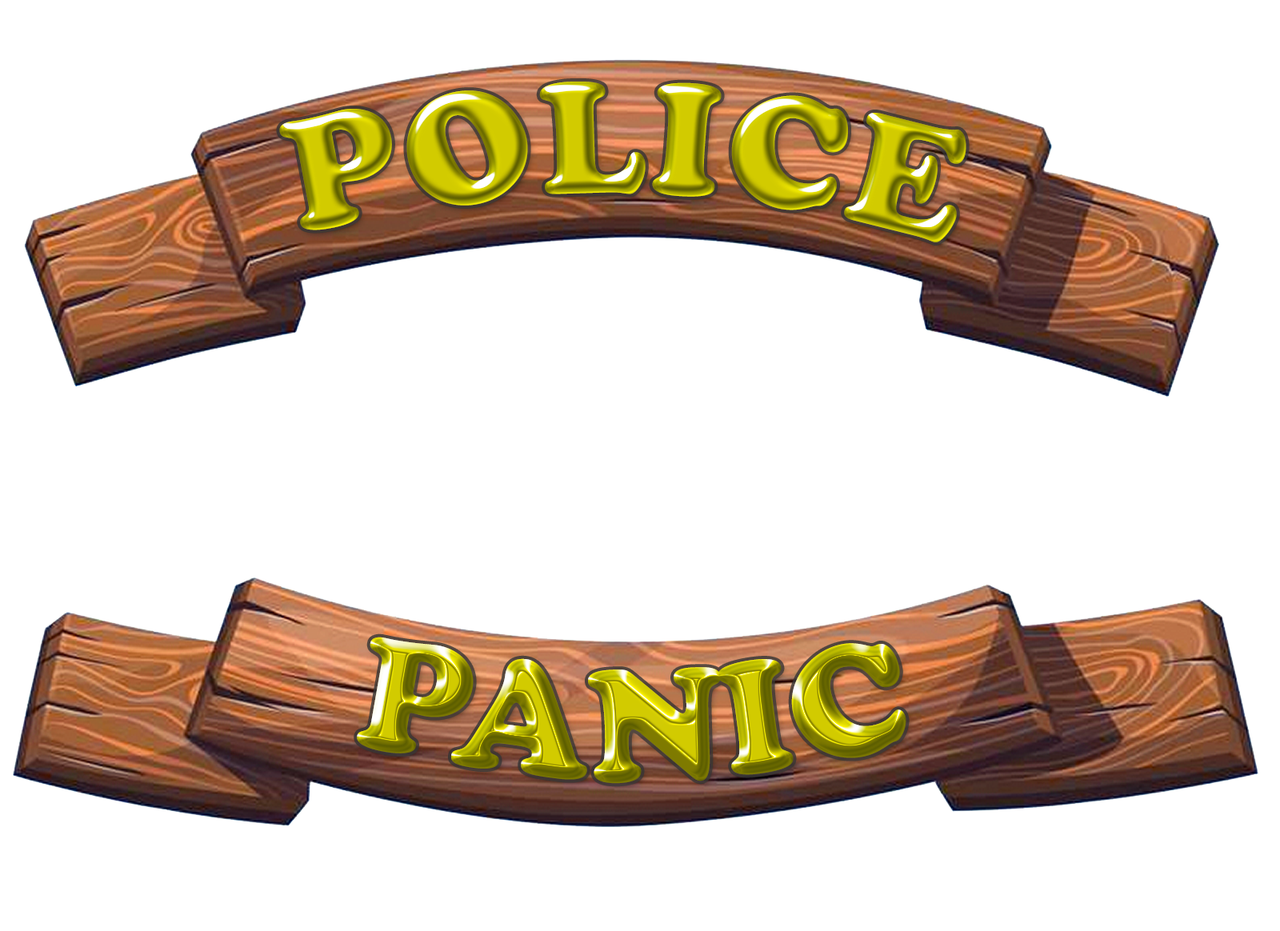
<style>
.page{position:relative;width:1280px;height:931px;background:#ffffff}
.page>*{position:absolute;margin:0}
.t1{font:156.8px "CooperBlackStd";letter-spacing:0.02em;text-transform:uppercase}
</style>
<div class="page">
<p class="t1" style="left:279px;top:82px;width:688px;height:160px">POLICE</p>
<p class="t1" style="left:357px;top:637px;width:550px;height:147px">PANIC</p>
</div>
